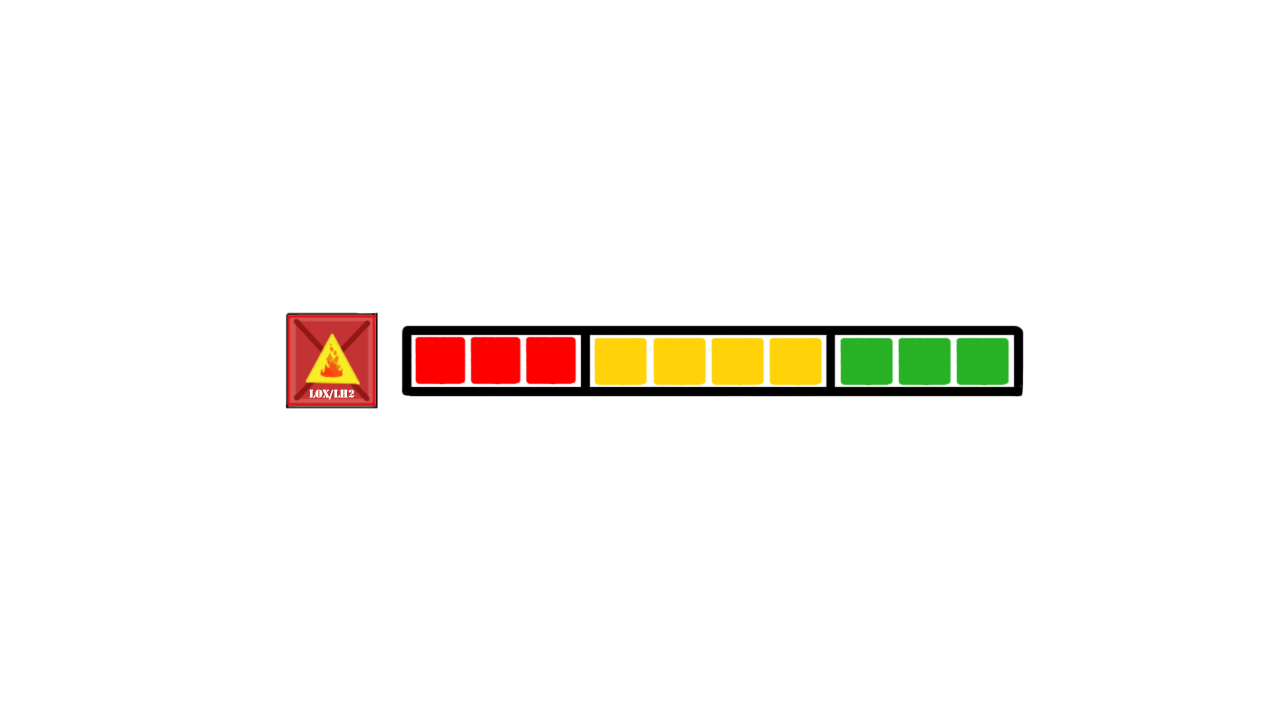
<style>
.page{position:relative;width:1280px;height:720px;background:#ffffff}
.page>*{position:absolute;margin:0}
.t1{font:11.6px "Stencil";color:#ffffff}
</style>
<div class="page">
<p class="t1" style="left:309px;top:389px;width:46px;height:11px">LOX/Lh2</p>
</div>
